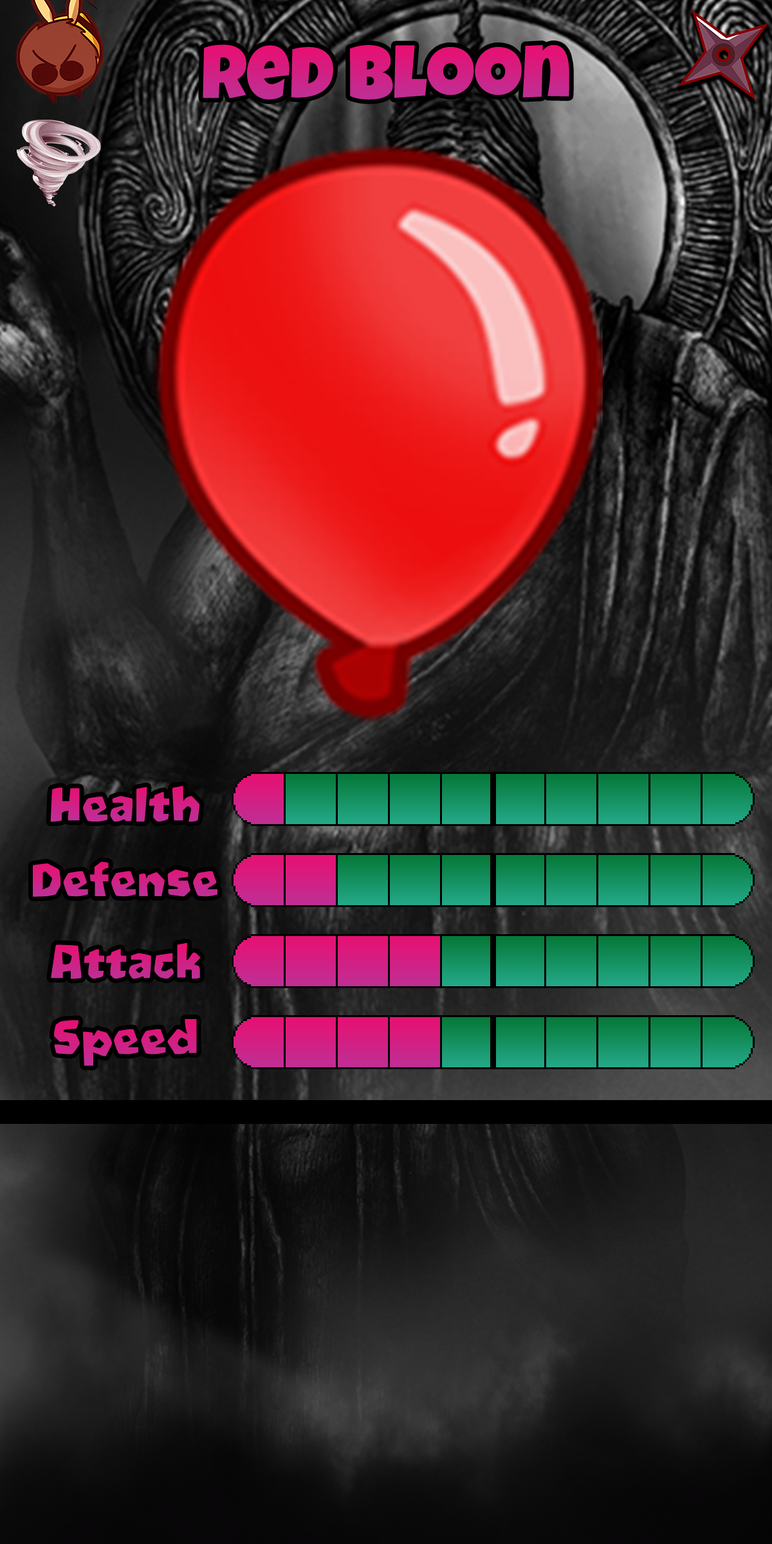
<style>
.page{position:relative;width:772px;height:1544px}
.page>*{position:absolute;margin:0}
.t1{font:128.7px "LuckiestGuy-Regular";color:#d31f83}
.t2{font:77.2px "Oetztype";color:#cf2286}
.t3{font:77.2px "Oetztype";color:#cd2388}
.t4{font:77.2px "Oetztype";color:#d41f82}
</style>
<div class="page">
<p class="t1" style="left:203px;top:44px;width:366px;height:56px">Red Bloon</p>
<p class="t2" style="left:50px;top:786px;width:150px;height:36px">Health</p>
<p class="t3" style="left:33px;top:862px;width:184px;height:35px">Defense</p>
<p class="t2" style="left:51px;top:943px;width:149px;height:36px">Attack</p>
<p class="t4" style="left:54px;top:1019px;width:143px;height:47px">Speed</p>
</div>
